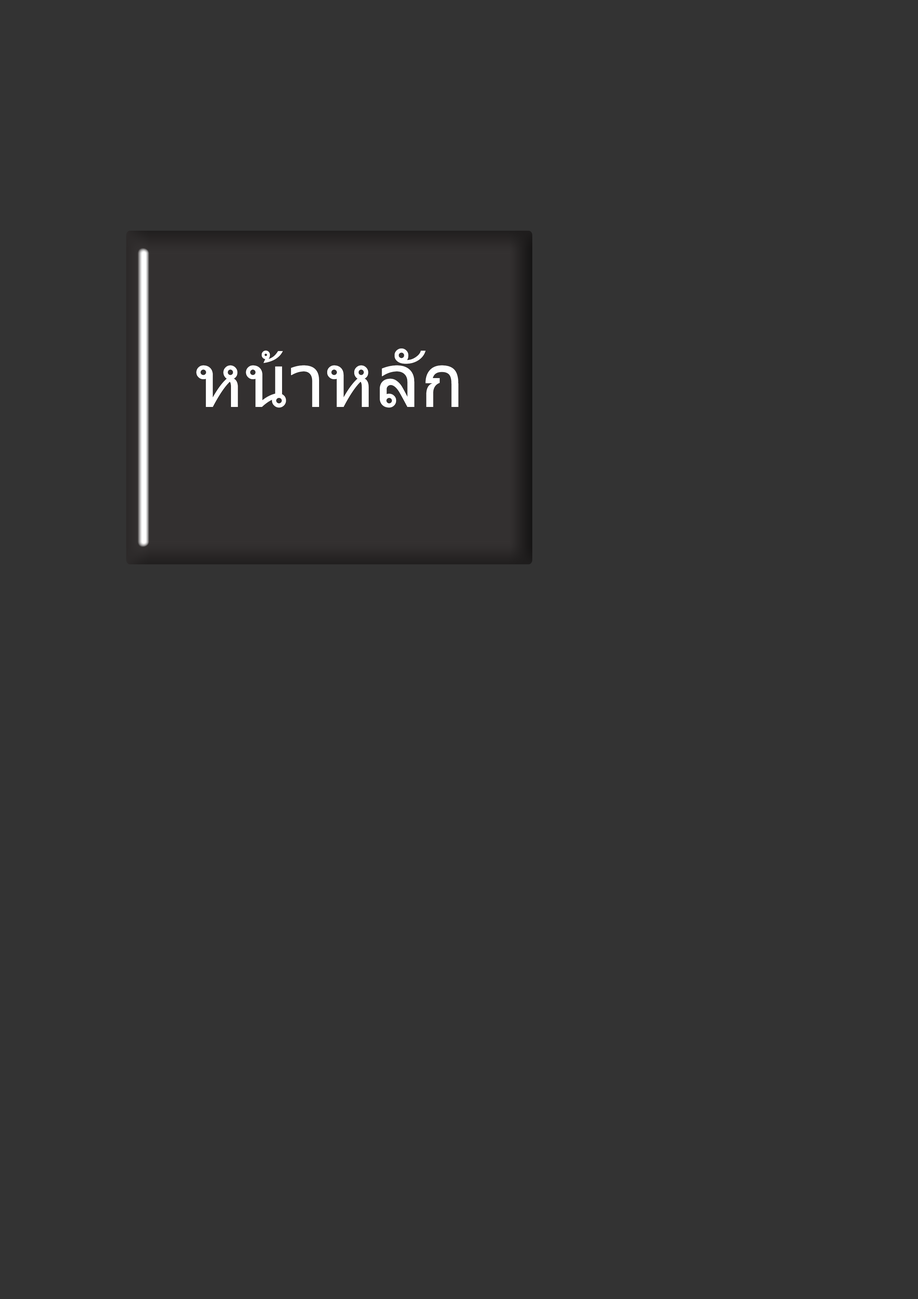
<style>
.page{position:relative;width:918px;height:1299px;background:#333333}
.page>*{position:absolute;margin:0}
.t1{font:74px "Tahoma";color:#ffffff}
.t2{font:37px "Tahoma";color:#ffffff}
</style>
<div class="page">
<p class="t1" style="left:196px;top:348px;width:263px;height:60px"><span class="t2"><br><br></span>หน้าหลัก</p>
</div>
